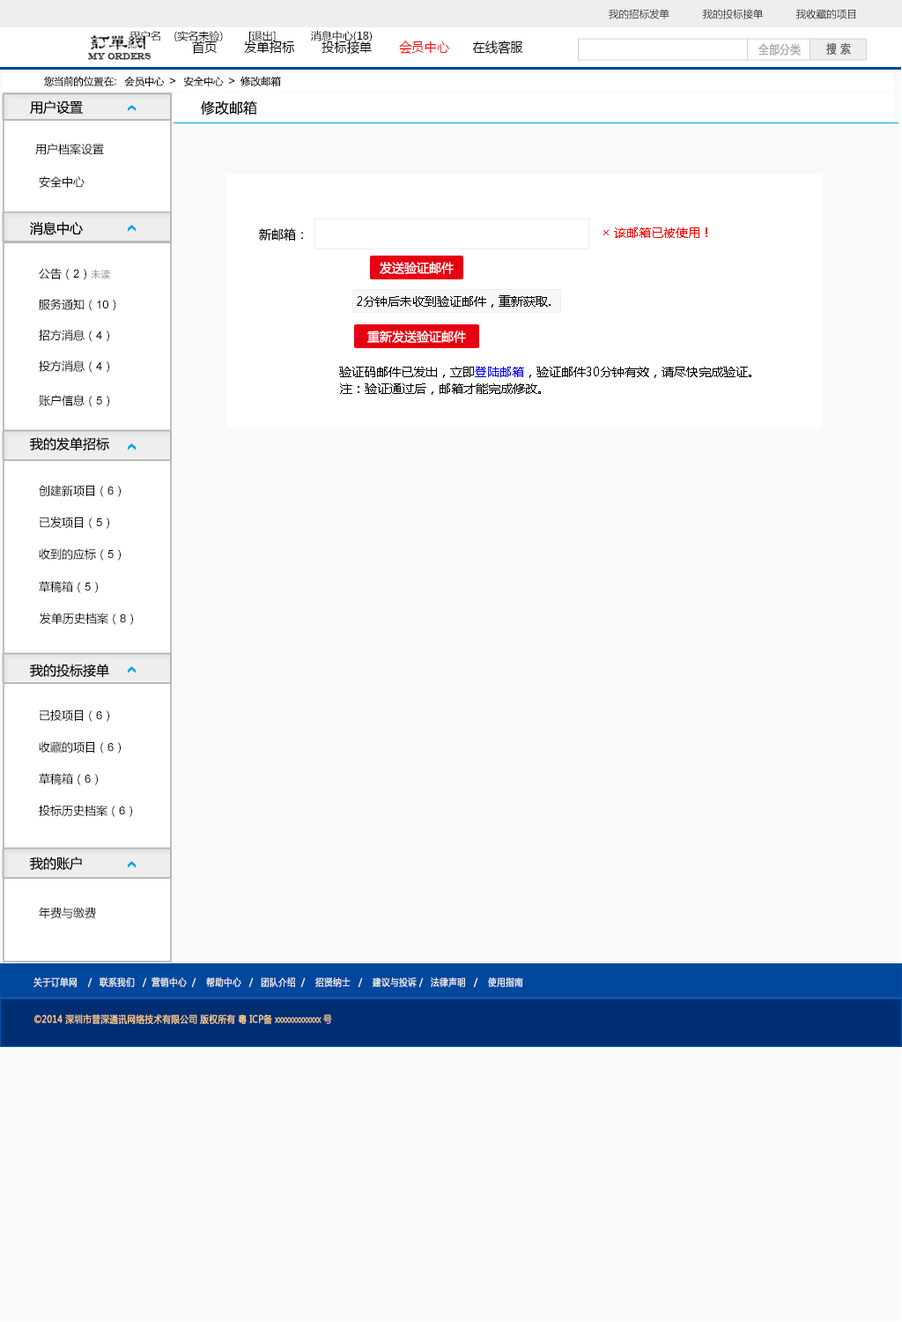
<style>
.page{position:relative;width:902px;height:1322px;background:#f9f9f9}
.page>*{position:absolute;margin:0}
.t1{font:10.1px "MicrosoftYaHei";color:#000000}
.t2{font:10.6px "MicrosoftYaHei";color:#000000}
.t3{font:13.6px "MicrosoftYaHei";color:#000000;font-variant:small-caps;scale:0.94 1}
.t4{font:13.6px "MicrosoftYaHei";color:#ff0000;font-variant:small-caps;scale:0.94 1}
.t5{font:8.7px "EngraversMT";color:#434343;font-variant:small-caps;font-weight:bold;scale:0.86 1}
.t6{font:11.6px "MicrosoftYaHei";color:#aaaaaa;font-variant:small-caps;font-weight:bold;scale:0.86 1}
.t7{font:11.6px "MicrosoftYaHei";color:#626262;font-variant:small-caps;font-weight:bold;scale:0.86 1}
.t8{font:10.6px "STXihei";color:#060606}
.t9{font:13.2px "MicrosoftYaHei";color:#060606}
.t10{font:14.1px "MicrosoftYaHei";color:#060606}
.t11{font:11.5px "MicrosoftYaHei";color:#060606}
.t12{font:12.3px "MicrosoftYaHei";color:#060606}
.t13{font:12.3px "MicrosoftYaHei";color:#ff0000}
.t14{font:11.5px "ArialMT";color:#060606}
.t15{font:9.7px "MicrosoftYaHei";color:#888584}
.t16{font:12.3px "MicrosoftYaHei";color:#ffffff}
.t17{font:12.3px "MicrosoftYaHei";color:#000000}
.t18{font:12.3px "MicrosoftYaHei";color:#0000ff}
.t19{font:9.7px "MicrosoftYaHei";color:#eeeeee;font-variant:small-caps;font-weight:bold;scale:0.86 1}
.t20{font:13.6px "STXihei";color:#eeeeee;font-variant:small-caps;font-weight:bold;scale:0.86 1}
.t21{font:9.7px "MicrosoftYaHei";color:#facd89;font-variant:small-caps;font-weight:bold;scale:0.87 1}
.t22{font:9.7px "MicrosoftYaHei";color:#eeeeee;font-variant:small-caps;font-weight:bold;scale:0.87 1}
</style>
<div class="page">
<p class="t1" style="left:609px;top:9px;width:247px;height:10px">我的招标发单           我的投标接单           我收藏的项目</p>
<p class="t2" style="left:130px;top:31px;width:242px;height:10px">用户名    (实名未验)        [退出]           消息中心(18)</p>
<p class="t3" style="left:192px;top:41px;width:331px;height:14px">首页       发单招标       投标接单       <span class="t4">会员中心</span>      在线客服</p>
<p class="t5" style="left:88px;top:53px;width:64px;height:7px">MY ORDERS</p>
<p class="t6" style="left:759px;top:43px;width:42px;height:13px">全部分类</p>
<p class="t7" style="left:826px;top:42px;width:25px;height:13px">搜 索</p>
<p class="t8" style="left:43px;top:76px;width:238px;height:11px">您当前的位置在：  会员中心  &gt;   安全中心  &gt;  修改邮箱</p>
<p class="t9" style="left:30px;top:100px;width:53px;height:15px">用户设置</p>
<p class="t10" style="left:201px;top:100px;width:56px;height:15px">修改邮箱</p>
<p class="t11" style="left:35px;top:143px;width:69px;height:12px">用户档案设置</p>
<p class="t11" style="left:39px;top:176px;width:46px;height:12px">安全中心</p>
<p class="t9" style="left:30px;top:221px;width:53px;height:14px">消息中心</p>
<p class="t12" style="left:259px;top:228px;width:44px;height:13px">新邮箱：</p>
<p class="t13" style="left:604px;top:227px;width:104px;height:11px">× 该邮箱已被使用！</p>
<p class="t11" style="left:39px;top:268px;width:71px;height:12px">公告（<span class="t14">2</span>）<span class="t15">未读</span></p>
<p class="t16" style="left:380px;top:262px;width:74px;height:12px">发送验证邮件</p>
<p class="t11" style="left:39px;top:299px;width:77px;height:12px">服务通知（<span class="t14">10</span>）</p>
<p class="t17" style="left:357px;top:295px;width:194px;height:13px">2分钟后未收到验证邮件，重新获取.</p>
<p class="t11" style="left:39px;top:330px;width:70px;height:12px">招方消息（<span class="t14">4</span>）</p>
<p class="t16" style="left:367px;top:330px;width:99px;height:13px">重新发送验证邮件</p>
<p class="t11" style="left:39px;top:360px;width:70px;height:13px">投方消息（<span class="t14">4</span>）</p>
<p class="t17" style="left:339px;top:367px;width:413px;height:11px">验证码邮件已发出，立即<span class="t18">登陆邮箱</span>，验证邮件30分钟有效，请尽快完成验证。</p>
<p class="t17" style="left:340px;top:383px;width:201px;height:12px">注：验证通过后，邮箱才能完成修改。</p>
<p class="t11" style="left:39px;top:395px;width:70px;height:12px">账户信息（<span class="t14">5</span>）</p>
<p class="t9" style="left:30px;top:437px;width:79px;height:14px">我的发单招标</p>
<p class="t11" style="left:39px;top:485px;width:82px;height:12px">创建新项目（<span class="t14">6</span>）</p>
<p class="t11" style="left:40px;top:516px;width:69px;height:13px">已发项目（<span class="t14">5</span>）</p>
<p class="t11" style="left:39px;top:548px;width:82px;height:12px">收到的应标（<span class="t14">5</span>）</p>
<p class="t11" style="left:39px;top:581px;width:59px;height:12px">草稿箱（<span class="t14">5</span>）</p>
<p class="t11" style="left:40px;top:612px;width:93px;height:13px">发单历史档案（<span class="t14">8</span>）</p>
<p class="t9" style="left:30px;top:663px;width:79px;height:15px">我的投标接单</p>
<p class="t11" style="left:40px;top:709px;width:69px;height:13px">已投项目（<span class="t14">6</span>）</p>
<p class="t11" style="left:39px;top:741px;width:82px;height:12px">收藏的项目（<span class="t14">6</span>）</p>
<p class="t11" style="left:39px;top:773px;width:59px;height:12px">草稿箱（<span class="t14">6</span>）</p>
<p class="t11" style="left:39px;top:804px;width:93px;height:13px">投标历史档案（<span class="t14">6</span>）</p>
<p class="t9" style="left:30px;top:856px;width:52px;height:15px">我的账户</p>
<p class="t11" style="left:39px;top:907px;width:57px;height:11px">年费与缴费</p>
<p class="t19" style="left:33px;top:976px;width:490px;height:11px"><span class="t20"><br><br></span>关于订单网    /   联系我们   /  营销中心  /    帮助中心   /   团队介绍  /    招贤纳士   /    建议与投诉 /   法律声明   /    使用指南</p>
<p class="t21" style="left:34px;top:1014px;width:298px;height:10px"><span class="t22"> </span>©2014 深圳市普深通讯网络技术有限公司 版权所有 粤 ICP备 xxxxxxxxxxxxx 号</p>
</div>
